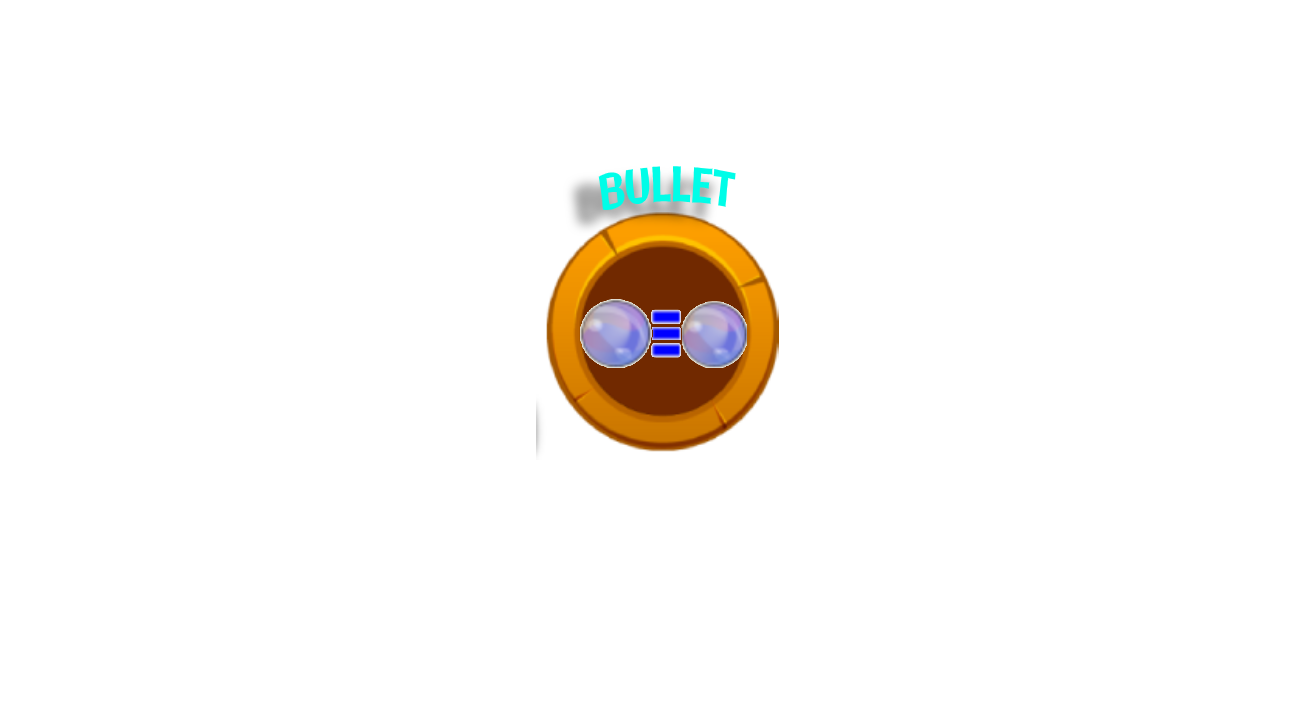
<style>
.page{position:relative;width:1315px;height:720px;background:#ffffff}
.page>*{position:absolute;margin:0}
.t1{font:47.9px "Galindo-Regular";color:#0ffde9;scale:0.71 1}
</style>
<div class="page">
<p class="t1" style="left:598px;top:166px;width:138px;height:44px">BULLET</p>
</div>
